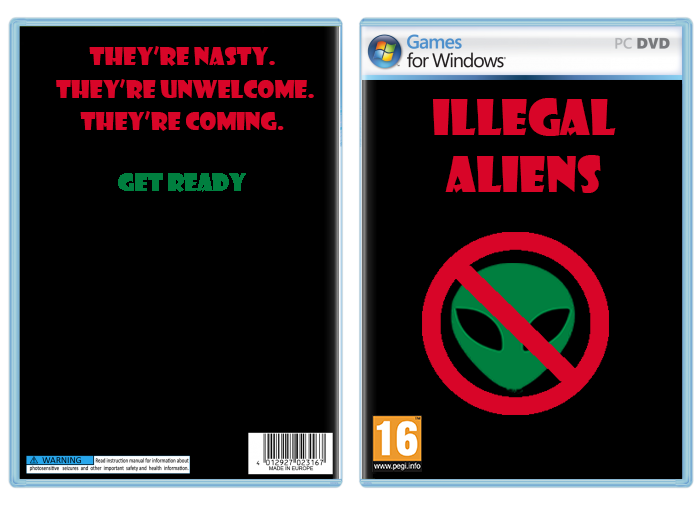
<style>
.page{position:relative;width:700px;height:508px;background:#000000}
.page>*{position:absolute;margin:0}
.t1{font:24px "ShowcardGothic-Reg";color:#d80528}
.t2{font:48px "ShowcardGothic-Reg";color:#d80528}
</style>
<div class="page">
<p class="t1" style="left:89px;top:46px;width:186px;height:20px">They’re nasty.</p>
<p class="t1" style="left:56px;top:79px;width:258px;height:20px">They’re unwelcome.</p>
<p class="t2" style="left:433px;top:98px;width:183px;height:95px;text-align:center">Illegal Aliens</p>
<p class="t1" style="left:80px;top:111px;width:204px;height:20px">they’re coming.</p>
</div>
